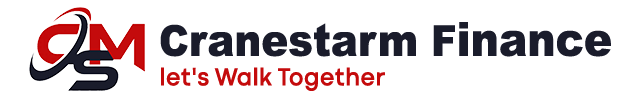
<style>
.page{position:relative;width:624px;height:100px;background:#ffffff}
.page>*{position:absolute;margin:0}
.t1{font:44.8px "Arial-Black";color:#1a1c2b;scale:0.9 1}
.t2{font:42.6px "Arial-Black";color:#1a1c2b;scale:0.9 1}
.t3{font:47px "Arial-Black";color:#1a1c2b;scale:0.9 1}
.t4{font:25.8px "CodecColdTrial-Bold";color:#c40b0c;scale:0.9 1}
</style>
<div class="page">
<p class="t1" style="left:160px;top:22px;width:451px;height:35px"><span class="t2">C</span>ranestarm<span class="t2"> F</span><span class="t3">inance</span></p>
<p class="t4" style="left:161px;top:67px;width:224px;height:24px">let's Walk Together</p>
</div>
